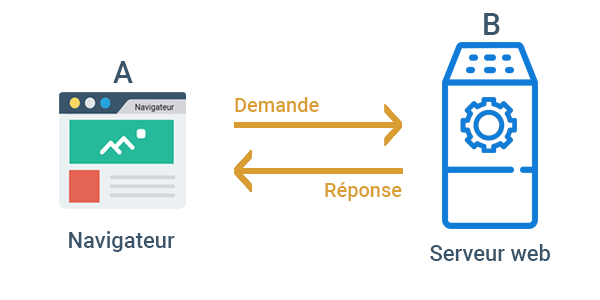
<style>
.page{position:relative;width:600px;height:300px;background:#ffffff}
.page>*{position:absolute;margin:0}
.t1{font:30px "Roboto-Medium";color:#3a556a}
.t2{font:20px "Roboto-Medium";color:#da9d32}
.t3{font:22px "Roboto-Medium";color:#3a556a}
</style>
<div class="page">
<p class="t1" style="left:484px;top:13px;width:16px;height:22px">B</p>
<p class="t1" style="left:113px;top:61px;width:20px;height:22px">A</p>
<p class="t2" style="left:235px;top:97px;width:84px;height:15px">Demande</p>
<p class="t2" style="left:325px;top:182px;width:77px;height:19px">Réponse</p>
<p class="t3" style="left:69px;top:231px;width:106px;height:21px">Navigateur</p>
<p class="t3" style="left:430px;top:244px;width:120px;height:17px">Serveur web</p>
</div>
